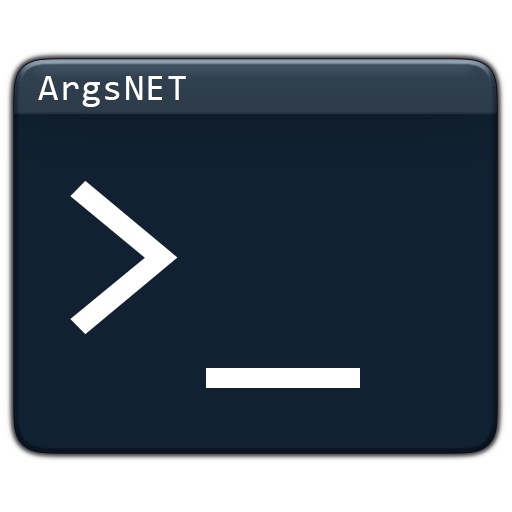
<style>
.page{position:relative;width:512px;height:512px;background:#112131}
.page>*{position:absolute;margin:0}
.t1{font:36.6px "Consolas";letter-spacing:0.035em;color:#ffffff}
.t2{font:280.2px "Consolas";letter-spacing:0.035em;color:#ffffff}
</style>
<div class="page">
<p class="t1" style="left:38px;top:76px;width:148px;height:31px">ArgsNET</p>
<p class="t2" style="left:70px;top:181px;width:290px;height:207px">&gt;_</p>
</div>
